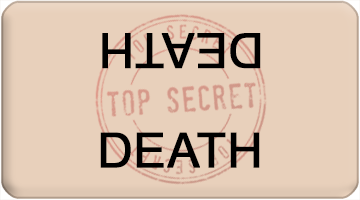
<style>
.page{position:relative;width:360px;height:200px;background:#e8d0bb}
.page>*{position:absolute;margin:0}
.t1{font:48px "ArialMT";color:#000000;font-weight:bold}
</style>
<div class="page">
<p class="t1" style="left:102px;top:33px;width:159px;height:36px;rotate:180deg">DEATH</p>
<p class="t1" style="left:100px;top:132px;width:160px;height:36px">DEATH</p>
</div>
